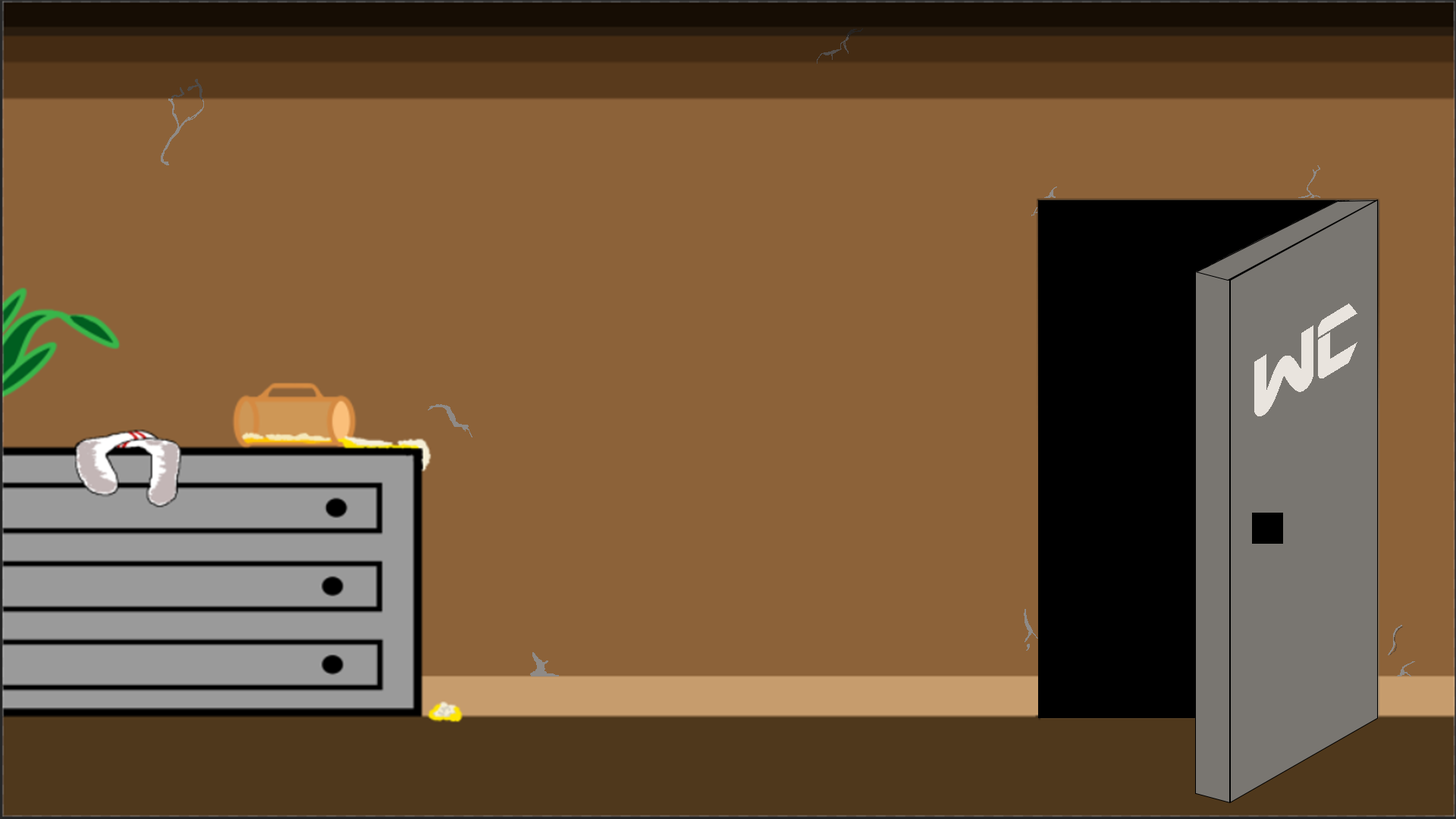
<style>
.page{position:relative;width:1456px;height:819px;background:#8c6239}
.page>*{position:absolute;margin:0}
.t1{font:94.1px "ARDESTINE";color:#e9e4de}
</style>
<div class="page">
<p class="t1" style="left:1254px;top:303px;width:103px;height:113px;rotate:-32deg">WC</p>
</div>
